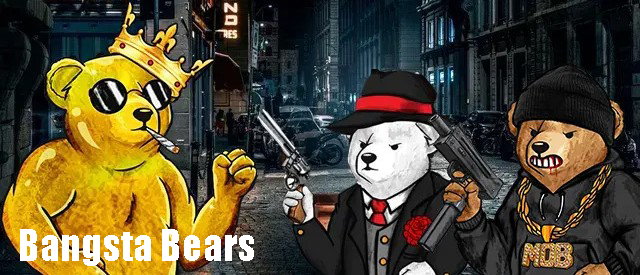
<style>
.page{position:relative;width:640px;height:275px}
.page>*{position:absolute;margin:0}
.t1{font:40px "Impact";color:#ffffff}
</style>
<div class="page">
<p class="t1" style="left:20px;top:229px;width:234px;height:37px">Bangsta Bears</p>
</div>
